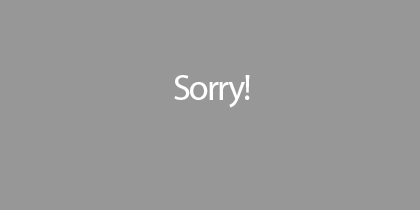
<style>
.page{position:relative;width:420px;height:210px;background:#979797}
.page>*{position:absolute;margin:0}
.t1{font:36px "MyriadPro-Regular";letter-spacing:-0.05em;color:#ffffff}
</style>
<div class="page">
<p class="t1" style="left:174px;top:75px;width:76px;height:33px">Sorry!</p>
</div>
